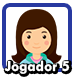
<style>
.page{position:relative;width:73px;height:80px;background:#ffffff}
.page>*{position:absolute;margin:0}
.t1{font:15.6px "TwCenMT-Bold";color:#ffffff}
</style>
<div class="page">
<p class="t1" style="left:4px;top:60px;width:66px;height:14px">Jogador 5</p>
</div>
